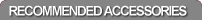
<style>
.page{position:relative;width:202px;height:20px;background:#858585}
.page>*{position:absolute;margin:0}
.t1{font:13.3px "Arial-BoldMT";letter-spacing:-0.1em;color:#ffffff}
</style>
<div class="page">
<p class="t1" style="left:9px;top:5px;width:178px;height:11px">RECOMMENDED ACCESSORIES</p>
</div>
